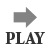
<style>
.page{position:relative;width:50px;height:50px;background:#ffffff}
.page>*{position:absolute;margin:0}
.t1{font:17.2px "MinionStd-Black";color:#333333}
</style>
<div class="page">
<p class="t1" style="left:5px;top:32px;width:40px;height:12px">PLAY</p>
</div>
